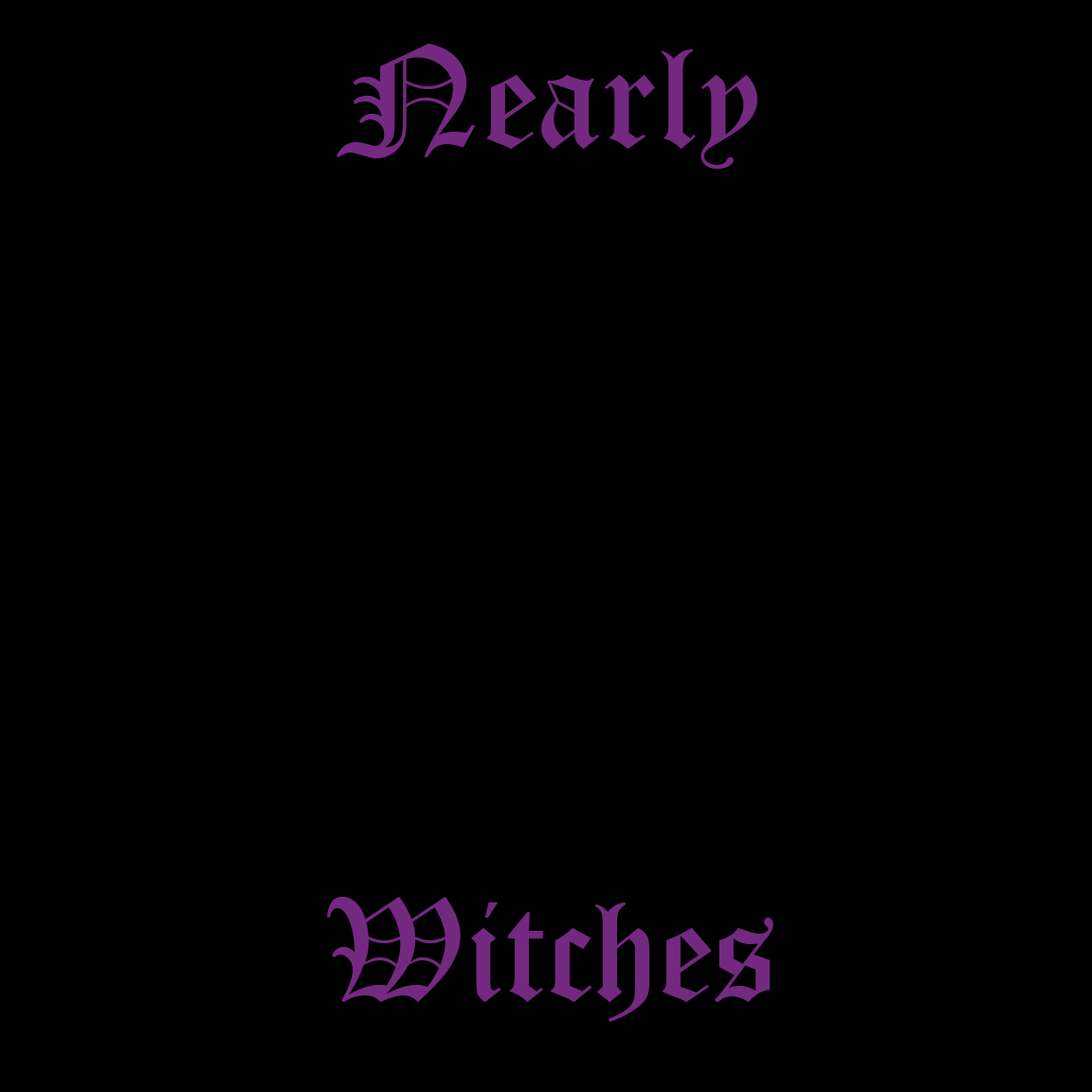
<style>
.page{position:relative;width:1092px;height:1092px;background:#000000}
.page>*{position:absolute;margin:0}
.t1{font:142.2px "OldEnglishTextMT";color:#742980}
</style>
<div class="page">
<p class="t1" style="left:327px;top:44px;width:446px;height:978px;text-align:center">Nearly <br><br><br><br><br>Witches</p>
</div>
